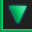
<style>
.page{position:relative;width:32px;height:32px;background:#202020}
.page>*{position:absolute;margin:0}
.t1{font:25.4px "Arial-BoldMT"}
</style>
<div class="page">
<p class="t1" style="left:9px;top:6px;width:18px;height:18px">▼</p>
</div>
